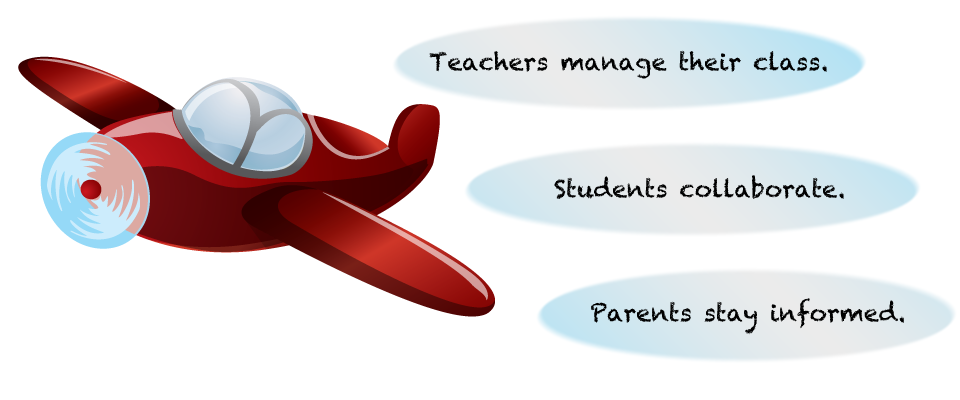
<style>
.page{position:relative;width:960px;height:400px;background:#ffffff}
.page>*{position:absolute;margin:0}
.t1{font:24px "Chalkduster";color:#000000}
</style>
<div class="page">
<p class="t1" style="left:429px;top:50px;width:398px;height:29px">Teachers manage their class.</p>
<p class="t1" style="left:554px;top:175px;width:290px;height:24px">Students collaborate.</p>
<p class="t1" style="left:591px;top:298px;width:313px;height:37px">Parents stay informed.</p>
</div>
